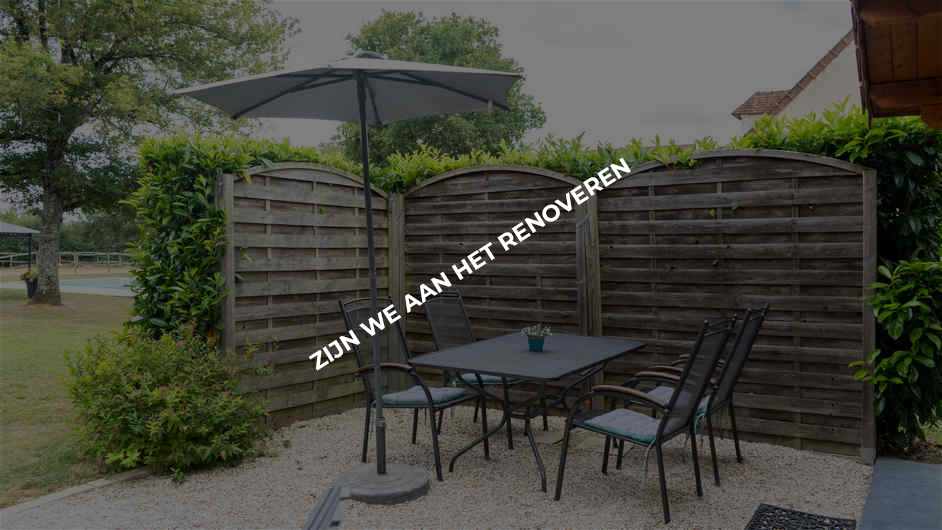
<style>
.page{position:relative;width:942px;height:530px}
.page>*{position:absolute;margin:0}
.t1{font:22.8px "Montserrat-Bold";color:#ffffff}
</style>
<div class="page">
<p class="t1" style="left:308px;top:157px;width:323px;height:214px;rotate:-32deg">ZIJN WE AAN HET RENOVEREN</p>
</div>
